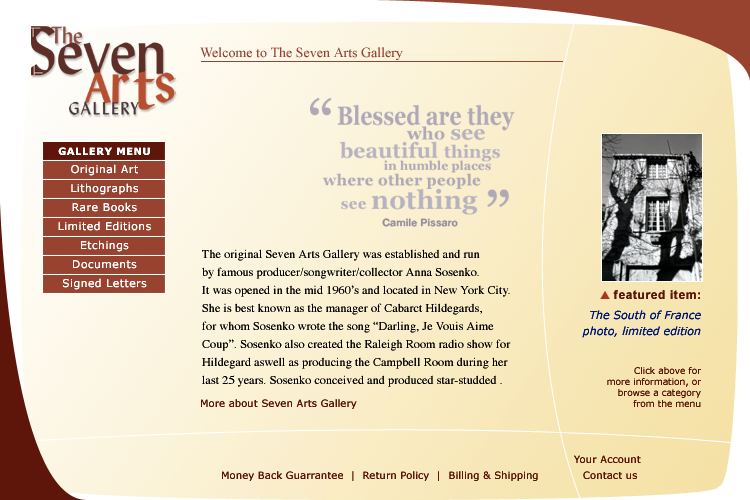
<style>
.page{position:relative;width:750px;height:500px}
.page>*{position:absolute;margin:0}
.t1{font:14px "TimesNewRomanPSMT";color:#984230}
.t2{font:10px "Verdana-Bold";letter-spacing:0.05em;color:#ffffff}
.t3{font:10.7px "Verdana";letter-spacing:0.05em;color:#ffffff}
.t4{font:12px/18px "Times-Roman";letter-spacing:0.01em;color:#000000}
.t5{font:11px/16px "Verdana-Italic";color:#021877}
.t6{font:12px/16px "Verdana-Bold";letter-spacing:0.05em;color:#5d1609}
.t7{font:12px/16px "Arial-BoldMT";letter-spacing:0.05em;color:#5d1609}
.t8{font:11px/20px "Verdana-Italic";color:#021877}
.t9{font:9px/11px "Verdana";color:#5d1609}
.t10{font:10px "Verdana";letter-spacing:0.01em;color:#5d1609}
</style>
<div class="page">
<p class="t1" style="left:200px;top:47px;width:203px;height:13px">Welcome to The Seven Arts Gallery</p>
<p class="t2" style="left:58px;top:147px;width:92px;height:8px">GALLERY MENU</p>
<p class="t3" style="left:71px;top:164px;width:67px;height:12px">Original Art</p>
<p class="t3" style="left:71px;top:183px;width:67px;height:12px">Lithographs</p>
<p class="t3" style="left:72px;top:202px;width:65px;height:10px">Rare Books</p>
<p class="t3" style="left:58px;top:221px;width:93px;height:10px">Limited Editions</p>
<p class="t3" style="left:81px;top:240px;width:48px;height:12px">Etchings</p>
<p class="t4" style="left:202px;top:249px;width:309px;height:138px">The original Seven Arts Gallery was established and run <br>by famous producer/songwriter/collector Anna Sosenko. <br>It was opened in the mid 1960’s and located in New York City. <br>She is best known as the manager of Cabarct Hildegards,<br>for whom Sosenko wrote the song “Darling, Je Vouis Aime <br>Coup”. Sosenko also created the Raleigh Room radio show for <br>Hildegard aswell as producing the Campbell Room during her <br>last 25 years. Sosenko conceived and produced star-studded .</p>
<p class="t3" style="left:73px;top:260px;width:64px;height:9px">Documents</p>
<p class="t3" style="left:63px;top:278px;width:84px;height:12px">Signed Letters</p>
<p class="t5" style="left:582px;top:290px;width:119px;height:48px;text-align:right"><span class="t6">     </span><span class="t7">featured item:<br></span><span class="t8">The South of France<br></span>photo, limited edition</p>
<p class="t9" style="left:607px;top:367px;width:94px;height:40px;text-align:right">Click above for<br>more information, or<br>browse a category<br>from the menu</p>
<p class="t10" style="left:201px;top:399px;width:156px;height:10px">More about Seven Arts Gallery</p>
<p class="t10" style="left:574px;top:455px;width:67px;height:8px">Your Account</p>
<p class="t10" style="left:222px;top:471px;width:316px;height:10px">Money Back Guarrantee  |  Return Policy  |  Billing &amp; Shipping</p>
<p class="t10" style="left:583px;top:471px;width:54px;height:8px">Contact us</p>
</div>
